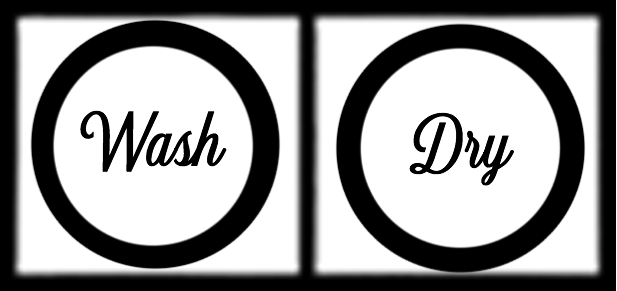
<style>
.page{position:relative;width:617px;height:291px;background:#ffffff}
.page>*{position:absolute;margin:0}
.t1{font:72px "Eastside-Regular";color:#000000}
</style>
<div class="page">
<p class="t1" style="left:80px;top:110px;width:147px;height:62px">Wash</p>
<p class="t1" style="left:409px;top:112px;width:105px;height:74px">Dry</p>
</div>
